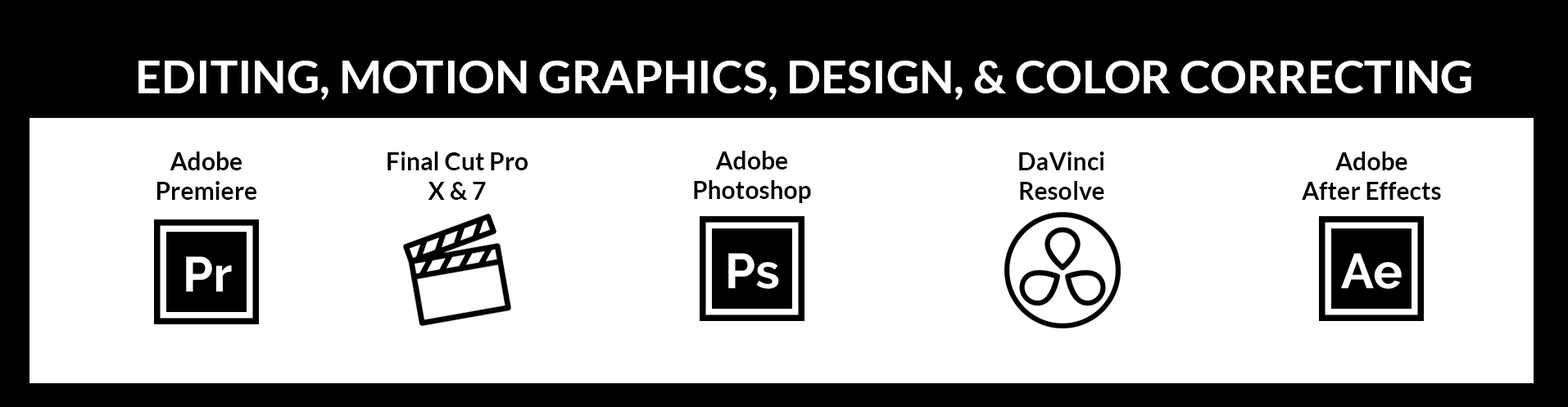
<style>
.page{position:relative;width:1568px;height:407px;background:#ffffff}
.page>*{position:absolute;margin:0}
.t1{font:45.9px "Lato-Bold";color:#ffffff}
.t2{font:24.6px "Lato-Bold";color:#000000}
</style>
<div class="page">
<p class="t1" style="left:138px;top:61px;width:1333px;height:39px">EDITING, MOTION GRAPHICS, DESIGN, &amp; COLOR CORRECTING</p>
<p class="t2" style="left:156px;top:152px;width:100px;height:48px;text-align:center">Adobe<br>Premiere</p>
<p class="t2" style="left:387px;top:152px;width:141px;height:48px;text-align:center">Final Cut Pro<br>X &amp; 7</p>
<p class="t2" style="left:694px;top:151px;width:117px;height:52px;text-align:center">Adobe <br>Photoshop</p>
<p class="t2" style="left:1019px;top:152px;width:85px;height:48px;text-align:center">DaVinci<br>Resolve</p>
<p class="t2" style="left:1302px;top:152px;width:139px;height:48px;text-align:center">Adobe<br>After Effects</p>
</div>
